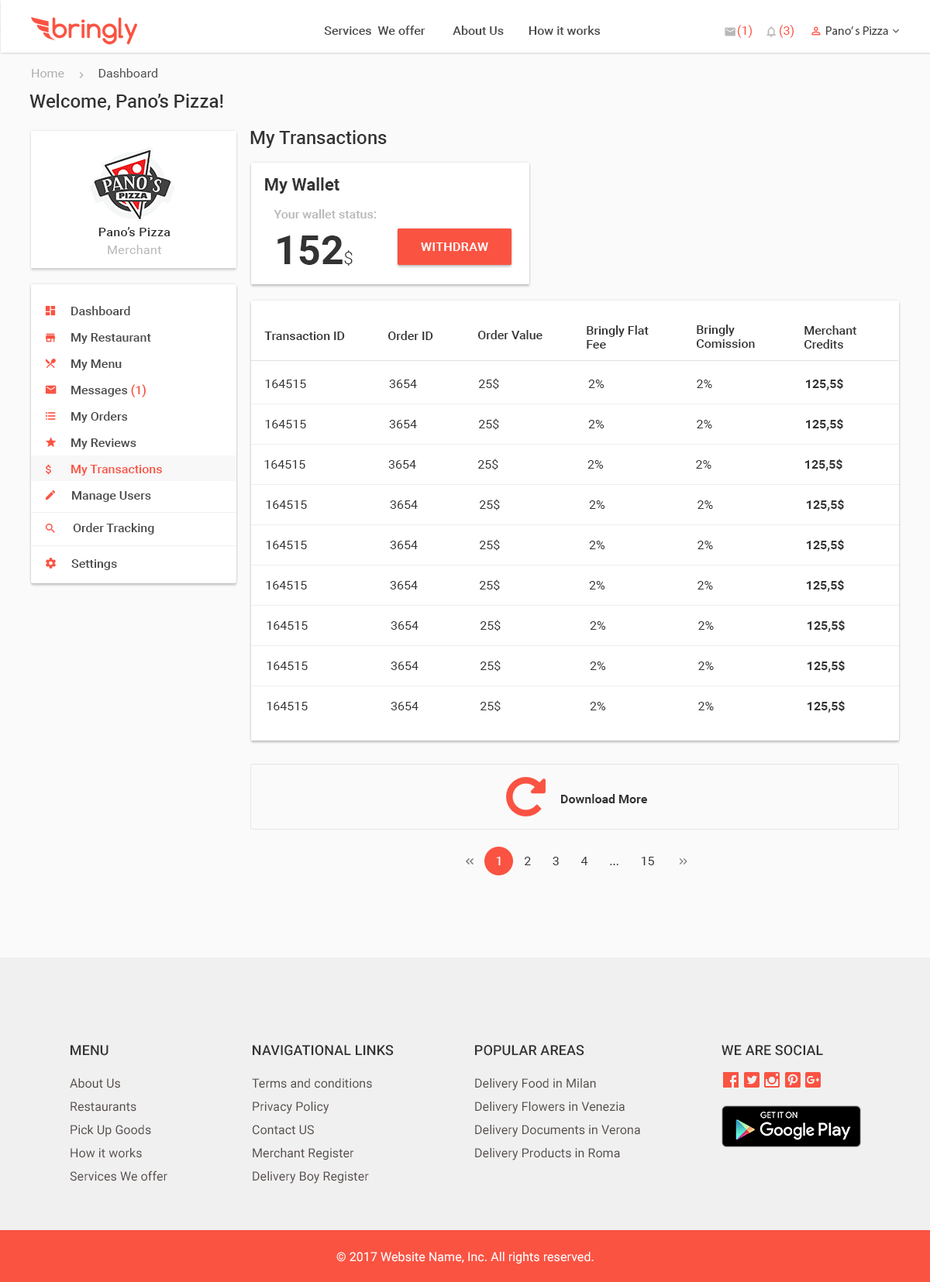
<style>
.page{position:relative;width:930px;height:1282px;background:#fafafa}
.page>*{position:absolute;margin:0}
.t1{font:12.4px "Roboto-Medium";color:#4a4a4a}
.t2{font:12.4px "Roboto-Regular";color:#fa5342}
.t3{font:12.4px "MyriadPro-Regular";color:#4a4a4a}
.t4{font:12.4px "Roboto-Regular";color:#4a4a4a}
.t5{font:12.4px "Roboto-Regular";color:#b0b0b0}
.t6{font:18.6px "Roboto-Medium";color:#333333}
.t7{font:17px "Roboto-Bold";color:#333333}
.t8{font:12.4px "Roboto-Medium";color:#b8b8b8}
.t9{font:12.4px "Roboto-Medium";letter-spacing:0.025em;color:#333333}
.t10{font:12.4px "Roboto-Regular";letter-spacing:0.025em;color:#b8b8b8}
.t11{font:40.3px "Roboto-Bold";color:#333333}
.t12{font:17px "Roboto-Light";color:#333333}
.t13{font:12.4px "Roboto-Medium";letter-spacing:0.025em;color:#fefefe;text-transform:uppercase}
.t14{font:12.4px/26.3px "Roboto-Medium";color:#4a4a4a}
.t15{font:12.4px/26.3px "Roboto-Medium";color:#fa5342}
.t16{font:12.4px/13.9px "Roboto-Medium";color:#333333}
.t17{font:12.4px "Roboto-Medium";color:#333333}
.t18{font:12.4px "Roboto-Regular";color:#333333}
.t19{font:12.4px "Roboto-Bold";color:#333333}
.t20{font:12.4px "Roboto-Regular";color:#ffffff}
.t21{font:13.9px "Roboto-Medium";letter-spacing:0.005em;color:#333333}
.t22{font:13.9px "Roboto-Medium";letter-spacing:0.005em;color:#333333;text-transform:uppercase}
.t23{font:12.4px/23.2px "Roboto-Regular";letter-spacing:0.005em;color:#554c4a}
.t24{font:12.4px "Roboto-Regular";letter-spacing:0.005em;color:#ffffff}
</style>
<div class="page">
<p class="t1" style="left:324px;top:26px;width:277px;height:9px">Services  We offer         About Us        How it works</p>
<p class="t2" style="left:737px;top:25px;width:15px;height:13px">(1)</p>
<p class="t2" style="left:779px;top:25px;width:14px;height:13px">(3)</p>
<p class="t3" style="left:826px;top:26px;width:62px;height:9px">Pano’ s Pizza</p>
<p class="t4" style="left:32px;top:68px;width:125px;height:9px"><span class="t5">Home           </span>Dashboard</p>
<p class="t6" style="left:29px;top:94px;width:194px;height:17px">Welcome, Pano’s Pizza!</p>
<p class="t6" style="left:250px;top:130px;width:137px;height:18px">My Transactions</p>
<p class="t7" style="left:265px;top:177px;width:74px;height:17px">My Wallet</p>
<p class="t8" style="left:274px;top:209px;width:102px;height:10px">Your wallet status:</p>
<p class="t9" style="left:98px;top:227px;width:72px;height:9px">Pano’s Pizza</p>
<p class="t10" style="left:108px;top:245px;width:53px;height:9px">Merchant</p>
<p class="t11" style="left:277px;top:236px;width:76px;height:30px">152<span class="t12">$</span></p>
<p class="t13" style="left:421px;top:243px;width:67px;height:8px">Withdraw</p>
<p class="t14" style="left:71px;top:306px;width:91px;height:170px">Dashboard<br>My Restaurant<br>My Menu<br>Messages <span class="t15">(1)<br></span>My Orders<br>My Reviews<br><span class="t15">My Transactions</span></p>
<p class="t16" style="left:587px;top:325px;width:62px;height:24px">Bringly Flat <br>Fee</p>
<p class="t16" style="left:696px;top:325px;width:59px;height:23px">Bringly <br>Comission</p>
<p class="t16" style="left:804px;top:325px;width:52px;height:24px">Merchant <br>Credits</p>
<p class="t17" style="left:264px;top:332px;width:81px;height:8px">Transaction ID</p>
<p class="t17" style="left:387px;top:331px;width:46px;height:9px">Order ID</p>
<p class="t17" style="left:477px;top:330px;width:65px;height:9px">Order Value</p>
<p class="t18" style="left:265px;top:378px;width:578px;height:13px">164515                           3654                    25$                             2%                              2%                           <span class="t19">   125,5$</span></p>
<p class="t18" style="left:265px;top:418px;width:578px;height:13px">164515                           3654                    25$                             2%                              2%                           <span class="t19">   125,5$</span></p>
<p class="t18" style="left:264px;top:459px;width:578px;height:12px">164515                           3654                    25$                             2%                              2%                           <span class="t19">   125,5$</span></p>
<p class="t1" style="left:72px;top:491px;width:79px;height:11px">Manage Users</p>
<p class="t18" style="left:266px;top:499px;width:578px;height:12px">164515                           3654                    25$                             2%                              2%                           <span class="t19">   125,5$</span></p>
<p class="t1" style="left:73px;top:523px;width:81px;height:12px">Order Tracking</p>
<p class="t18" style="left:266px;top:539px;width:578px;height:13px">164515                           3654                    25$                             2%                              2%                           <span class="t19">   125,5$</span></p>
<p class="t1" style="left:71px;top:559px;width:46px;height:11px">Settings</p>
<p class="t18" style="left:266px;top:580px;width:578px;height:12px">164515                           3654                    25$                             2%                              2%                           <span class="t19">   125,5$</span></p>
<p class="t18" style="left:267px;top:620px;width:578px;height:12px">164515                           3654                    25$                             2%                              2%                           <span class="t19">   125,5$</span></p>
<p class="t18" style="left:267px;top:660px;width:578px;height:13px">164515                           3654                    25$                             2%                              2%                           <span class="t19">   125,5$</span></p>
<p class="t18" style="left:267px;top:700px;width:578px;height:13px">164515                           3654                    25$                             2%                              2%                           <span class="t19">   125,5$</span></p>
<p class="t19" style="left:561px;top:794px;width:86px;height:10px">Download More</p>
<p class="t18" style="left:496px;top:857px;width:158px;height:9px"><span class="t20">1    </span>   2       3       4       ...       15</p>
<p class="t21" style="left:71px;top:1045px;width:37px;height:11px">MENU</p>
<p class="t22" style="left:253px;top:1045px;width:141px;height:11px">Navigational Links</p>
<p class="t22" style="left:475px;top:1045px;width:109px;height:11px">Popular Areas</p>
<p class="t22" style="left:721px;top:1045px;width:102px;height:11px">We are social</p>
<p class="t23" style="left:70px;top:1079px;width:97px;height:103px">About Us<br>Restaurants<br>Pick Up Goods <br>How it works <br>Services We offer</p>
<p class="t23" style="left:252px;top:1079px;width:120px;height:105px">Terms and conditions<br>Privacy Policy<br>Contact US <br>Merchant Register <br>Delivery Boy Register</p>
<p class="t23" style="left:475px;top:1079px;width:165px;height:82px">Delivery Food in Milan<br>Delivery Flowers in Venezia<br>Delivery Documents in Verona<br>Delivery Products in Roma</p>
<p class="t24" style="left:336px;top:1252px;width:258px;height:13px">© 2017 Website Name, Inc. All rights reserved.</p>
</div>
